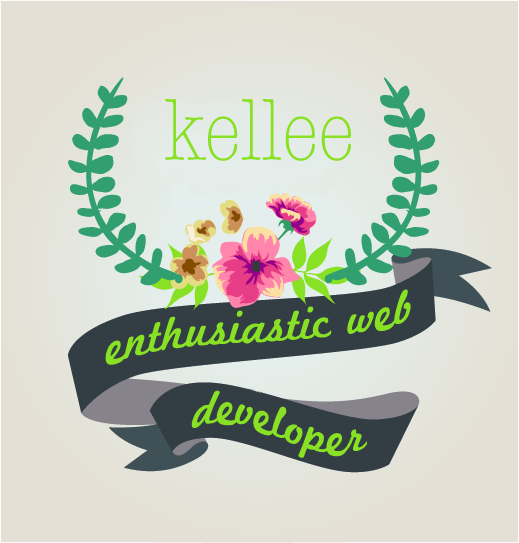
<style>
.page{position:relative;width:519px;height:543px;background:#e4e0d5}
.page>*{position:absolute;margin:0}
.t1{font:90px "AmericanTypewriter-CondensedLight";color:#88e124}
.t2{font:48px "MarketingScript";color:#88e124}
.t3{font:47.8px "MarketingScript";color:#88e124}
</style>
<div class="page">
<p class="t1" style="left:165px;top:99px;width:186px;height:62px">kellee</p>
<p class="t2" style="left:105px;top:289px;width:306px;height:76px;rotate:-8deg">enthusiastic web</p>
<p class="t3" style="left:191px;top:390px;width:176px;height:68px;rotate:6deg">developer</p>
</div>
